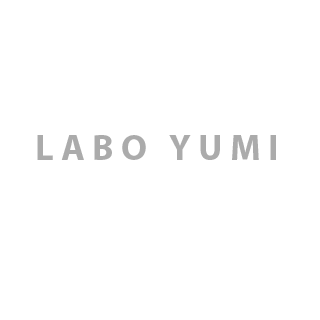
<style>
.page{position:relative;width:320px;height:320px;background:#ffffff}
.page>*{position:absolute;margin:0}
.t1{font:36px "MyriadPro-Bold";letter-spacing:0.205em;color:#ababab}
</style>
<div class="page">
<p class="t1" style="left:37px;top:135px;width:239px;height:25px">LABO YUMI</p>
</div>
